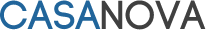
<style>
.page{position:relative;width:207px;height:30px;background:#ffffff}
.page>*{position:absolute;margin:0}
.t1{font:40.4px "Code-Bold";letter-spacing:0.025em;color:#21659b}
.t2{font:40.4px "Code-Bold";letter-spacing:0.025em;color:#404040}
</style>
<div class="page">
<p class="t1" style="left:0px;top:0px;width:206px;height:30px">Casa<span class="t2">Nova</span></p>
</div>
